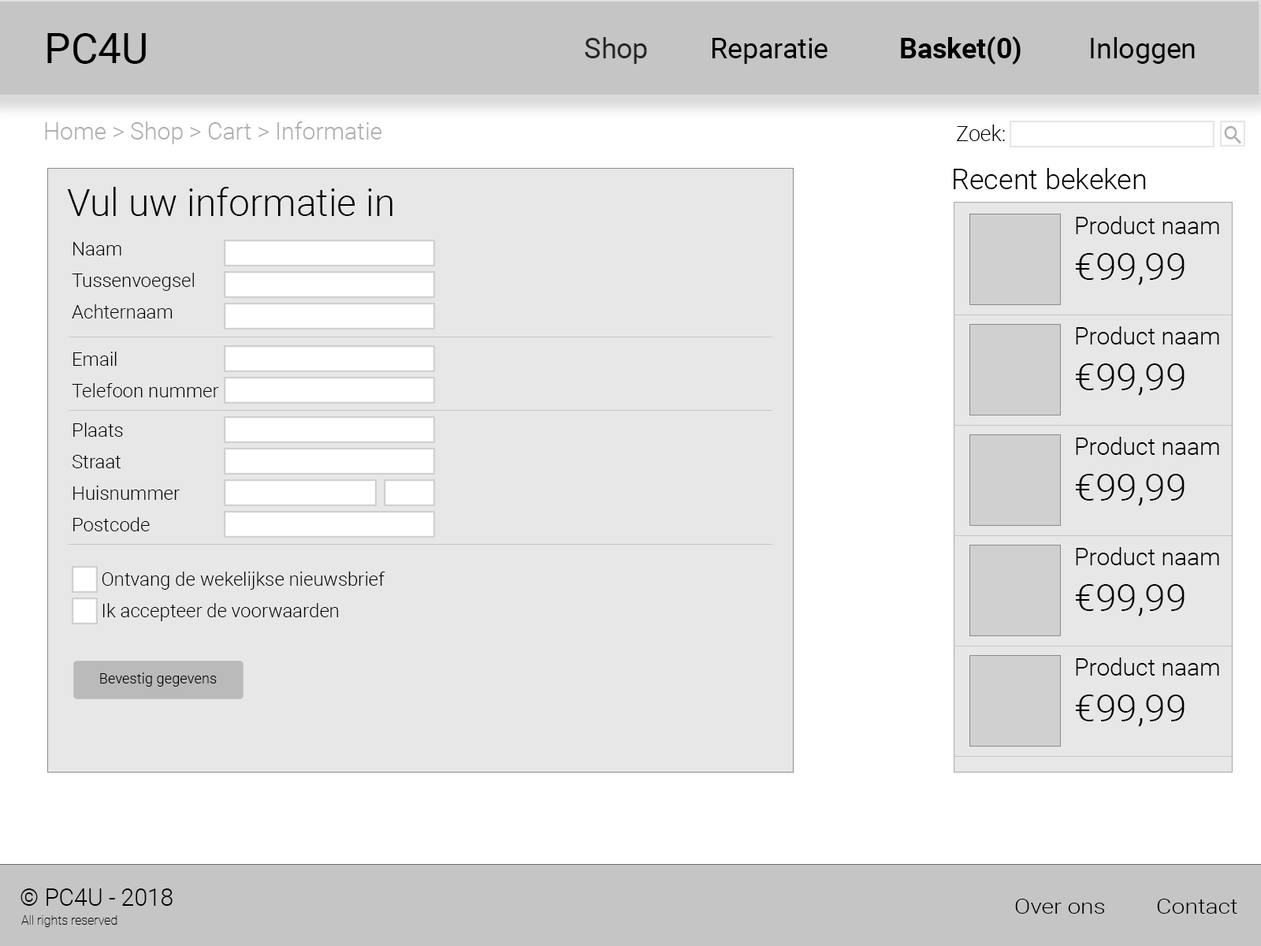
<style>
.page{position:relative;width:1261px;height:946px;background:#e7e7e7}
.page>*{position:absolute;margin:0}
.t1{font:42px "Roboto-Regular";color:#000000}
.t2{font:28px "Roboto-Regular";color:#000000}
.t3{font:28px "Roboto-Regular";color:#262626}
.t4{font:28px "Roboto-Bold";color:#000000}
.t5{font:23.6px "Roboto-Light";color:#afafaf}
.t6{font:21px "Roboto-Light";color:#000000}
.t7{font:28.4px "Roboto-Light";color:#000000}
.t8{font:37.8px "Roboto-Light";color:#000000}
.t9{font:23.6px "Roboto-Light";color:#000000}
.t10{font:18.9px "Roboto-Light";color:#000000}
.t11{font:14.5px "Roboto-Light";color:#000000}
.t12{font:20.4px "Roboto-Light";color:#000000;scale:1.16 1}
.t13{font:12.6px "Roboto-Thin";color:#000000}
</style>
<div class="page">
<p class="t1" style="left:47px;top:33px;width:99px;height:31px">PC4U</p>
<p class="t2" style="left:585px;top:36px;width:610px;height:29px"><span class="t3">Shop</span>  Reparatie   <span class="t4">Basket(0)</span>   Inloggen</p>
<p class="t5" style="left:45px;top:121px;width:336px;height:23px">Home &gt; Shop &gt; Cart &gt; Informatie</p>
<p class="t6" style="left:957px;top:125px;width:48px;height:16px">Zoek:</p>
<p class="t7" style="left:954px;top:168px;width:192px;height:21px">Recent bekeken</p>
<p class="t8" style="left:67px;top:187px;width:325px;height:29px">Vul uw informatie in</p>
<p class="t9" style="left:1076px;top:216px;width:143px;height:18px">Product naam</p>
<p class="t10" style="left:73px;top:242px;width:48px;height:13px">Naam</p>
<p class="t8" style="left:1076px;top:253px;width:108px;height:32px">€99,99</p>
<p class="t10" style="left:72px;top:273px;width:122px;height:18px">Tussenvoegsel</p>
<p class="t10" style="left:72px;top:304px;width:101px;height:14px">Achternaam</p>
<p class="t9" style="left:1076px;top:326px;width:143px;height:18px">Product naam</p>
<p class="t10" style="left:73px;top:351px;width:44px;height:15px">Email</p>
<p class="t8" style="left:1076px;top:363px;width:108px;height:33px">€99,99</p>
<p class="t10" style="left:72px;top:383px;width:147px;height:14px">Telefoon nummer</p>
<p class="t10" style="left:73px;top:422px;width:50px;height:15px">Plaats</p>
<p class="t9" style="left:1076px;top:437px;width:143px;height:18px">Product naam</p>
<p class="t10" style="left:73px;top:455px;width:48px;height:13px">Straat</p>
<p class="t8" style="left:1076px;top:474px;width:108px;height:32px">€99,99</p>
<p class="t10" style="left:73px;top:485px;width:107px;height:15px">Huisnummer</p>
<p class="t10" style="left:73px;top:517px;width:77px;height:14px">Postcode</p>
<p class="t9" style="left:1076px;top:547px;width:143px;height:18px">Product naam</p>
<p class="t10" style="left:102px;top:571px;width:283px;height:18px">Ontvang de wekelijkse nieuwsbrief</p>
<p class="t8" style="left:1076px;top:584px;width:108px;height:32px">€99,99</p>
<p class="t10" style="left:102px;top:603px;width:236px;height:18px">Ik accepteer de voorwaarden</p>
<p class="t9" style="left:1076px;top:657px;width:143px;height:18px">Product naam</p>
<p class="t11" style="left:100px;top:672px;width:117px;height:14px">Bevestig gegevens</p>
<p class="t8" style="left:1076px;top:694px;width:108px;height:33px">€99,99</p>
<p class="t9" style="left:20px;top:888px;width:153px;height:17px">© PC4U - 2018</p>
<p class="t12" style="left:1015px;top:898px;width:222px;height:15px">Over ons  Contact</p>
<p class="t13" style="left:21px;top:915px;width:96px;height:12px">All rights reserved</p>
</div>
